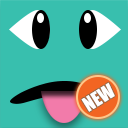
<style>
.page{position:relative;width:128px;height:128px;background:#38bfae}
.page>*{position:absolute;margin:0}
.t1{font:18.6px "Impact";color:#ffffff}
</style>
<div class="page">
<p class="t1" style="left:81px;top:82px;width:34px;height:30px;rotate:-32deg">NEW</p>
</div>
